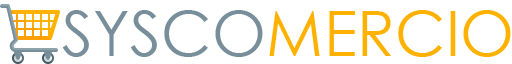
<style>
.page{position:relative;width:512px;height:64px;background:#ffffff}
.page>*{position:absolute;margin:0}
.t1{font:62.5px "CenturyGothic";color:#ffb100}
.t2{font:62.5px "CenturyGothic";color:#788f9b}
</style>
<div class="page">
<p class="t1" style="left:62px;top:10px;width:449px;height:47px"><span class="t2">SYSCO</span>MERCIO</p>
</div>
